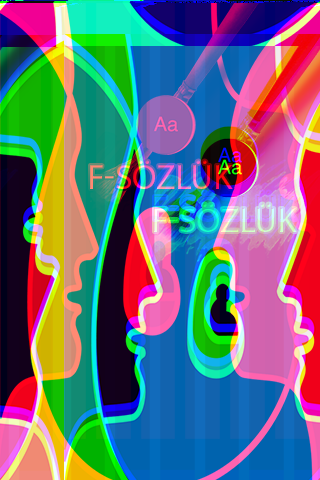
<style>
.page{position:relative;width:320px;height:480px}
.page>*{position:absolute;margin:0}
.t1{font:34.7px "MyriadPro-Regular";text-transform:uppercase}
</style>
<div class="page">
<p class="t1" style="left:90px;top:157px;width:143px;height:29px">F-Sözlük</p>
</div>
